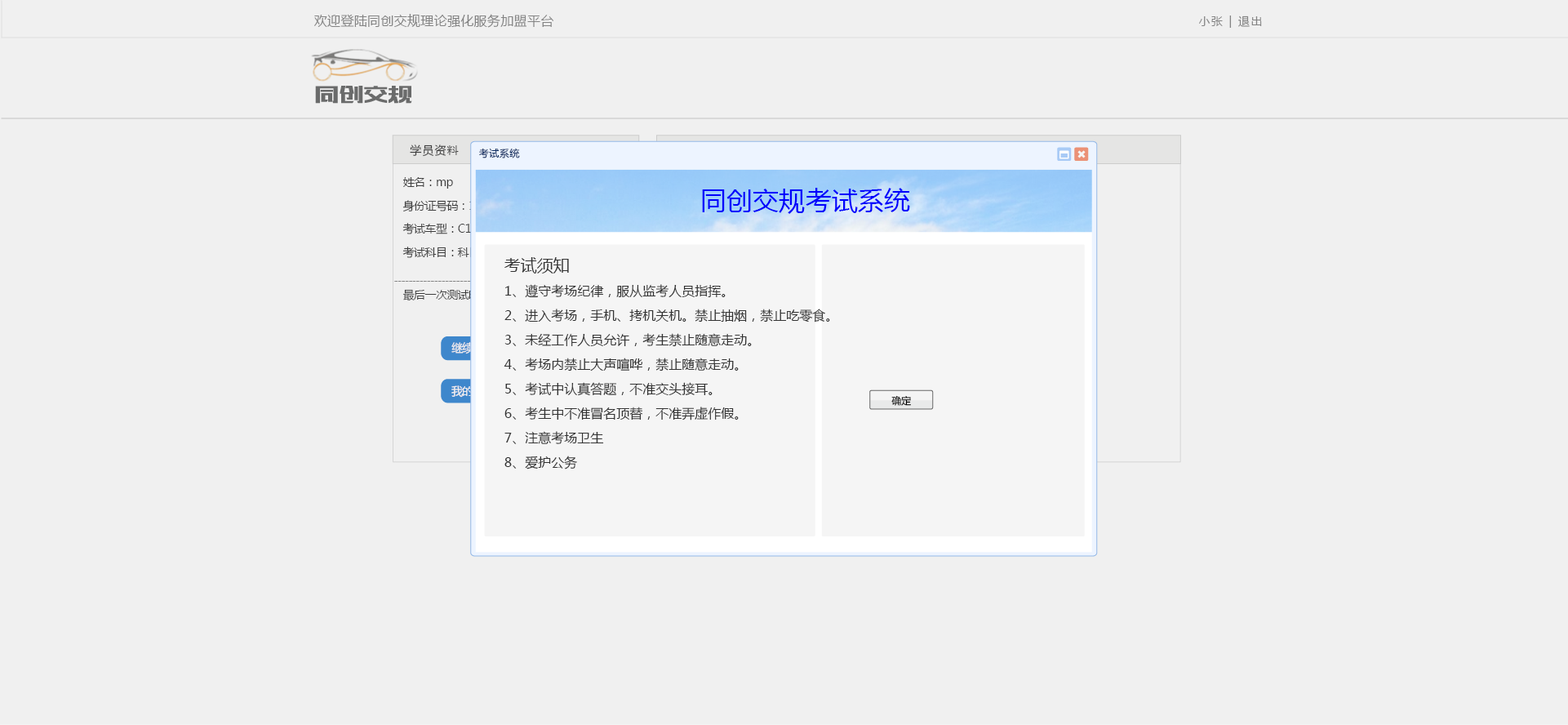
<style>
.page{position:relative;width:1568px;height:725px;background:#f0f0f0}
.page>*{position:absolute;margin:0}
.t1{font:13.1px "MicrosoftYaHei";letter-spacing:0.02em;color:#838383}
.t2{font:11.4px "MicrosoftYaHei";letter-spacing:0.12em;color:#838383}
.t3{font:23.3px "MFBanHei_Noncommercial-Regular";letter-spacing:0.055em;color:#6a6b6b;text-transform:uppercase}
.t4{font:11.4px "MicrosoftYaHei";letter-spacing:0.08em;color:#3e3e3e}
.t5{font:9.8px "MicrosoftYaHei";letter-spacing:0.04em;color:#0d2d61}
.t6{font:11.4px/23.5px "MicrosoftYaHei";letter-spacing:-0.04em;color:#3e3e3e}
.t7{font:26.3px "MicrosoftYaHei";color:#0000fc}
.t8{font:13.1px/24.5px "MicrosoftYaHei";color:#333333}
.t9{font:16.3px/24.5px "MicrosoftYaHei";color:#333333}
.t10{font:11.4px "MicrosoftYaHei";letter-spacing:-0.04em}
.t11{font:11.4px "MicrosoftYaHei";letter-spacing:-0.06em;color:#ffffff}
.t12{font:9.8px "MicrosoftYaHei";color:#000000}
</style>
<div class="page">
<p class="t1" style="left:314px;top:14px;width:239px;height:14px">欢迎登陆同创交规理论强化服务加盟平台</p>
<p class="t2" style="left:1199px;top:16px;width:63px;height:12px">小张 | 退出</p>
<p class="t3" style="left:315px;top:86px;width:97px;height:18px">同创交规</p>
<p class="t4" style="left:410px;top:144px;width:49px;height:13px">学员资料</p>
<p class="t5" style="left:479px;top:148px;width:41px;height:10px">考试系统</p>
<p class="t6" style="left:402px;top:177px;width:110px;height:81px">姓名：mp<br>身份证号码：1<br>考试车型：C1C2C3C4<br>考试科目：科目一</p>
<p class="t7" style="left:702px;top:188px;width:208px;height:26px">同创交规考试系统</p>
<p class="t8" style="left:504px;top:257px;width:326px;height:212px"><span class="t9">考试须知<br></span>1、遵守考场纪律，服从监考人员指挥。<br>2、进入考场，手机、拷机关机。禁止抽烟，禁止吃零食。<br>3、未经工作人员允许，考生禁止随意走动。<br>4、考场内禁止大声喧哗，禁止随意走动。<br>5、考试中认真答题，不准交头接耳。<br>6、考生中不准冒名顶替，不准弄虚作假。<br>7、注意考场卫生<br>8、爱护公务</p>
<p class="t10" style="left:402px;top:289px;width:213px;height:12px">最后一次测试时间：2017-03-29 09:90:50.0</p>
<p class="t11" style="left:451px;top:385px;width:44px;height:13px">我的错题</p>
<p class="t12" style="left:891px;top:395px;width:20px;height:11px">确定</p>
</div>
